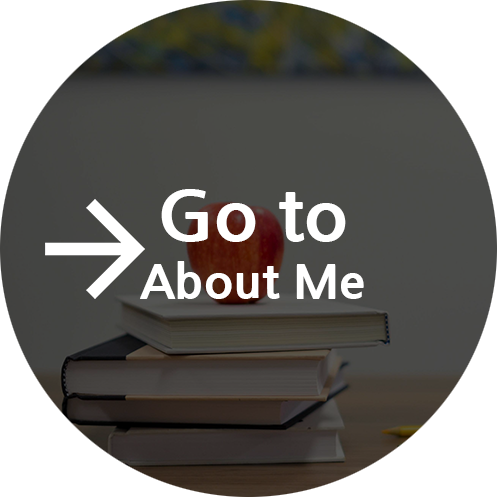
<style>
.page{position:relative;width:502px;height:500px;background:#ffffff}
.page>*{position:absolute;margin:0}
.t1{font:48px "NanumGothicExtraBold";color:#ffffff}
.t2{font:72px "NanumGothicExtraBold";color:#ffffff}
</style>
<div class="page">
<p class="t1" style="left:140px;top:189px;width:224px;height:110px;text-align:center"><span class="t2">Go to<br></span>About Me</p>
</div>
